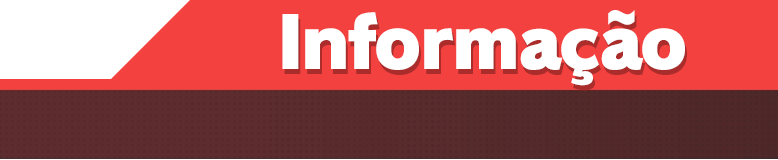
<style>
.page{position:relative;width:778px;height:160px;background:#f3413f}
.page>*{position:absolute;margin:0}
.t1{font:70.7px "RodinPro-UB";letter-spacing:-0.036em;color:#ffffff}
</style>
<div class="page">
<p class="t1" style="left:282px;top:10px;width:403px;height:76px">Informação</p>
</div>
